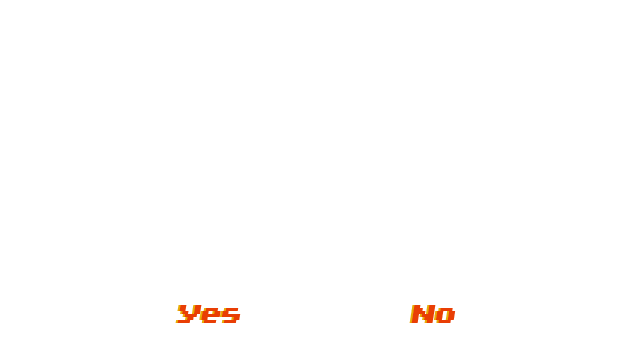
<style>
.page{position:relative;width:640px;height:360px;background:#ffffff}
.page>*{position:absolute;margin:0}
.t1{font:30px "Invasion2000";color:#eaad05}
.t2{font:30px "Invasion2000";color:#ea3e05}
</style>
<div class="page">
<p class="t1" style="left:175px;top:305px;width:64px;height:18px">Yes</p>
<p class="t2" style="left:177px;top:305px;width:64px;height:18px">Yes</p>
<p class="t1" style="left:409px;top:305px;width:45px;height:18px">No</p>
<p class="t2" style="left:411px;top:305px;width:45px;height:18px">No</p>
</div>
